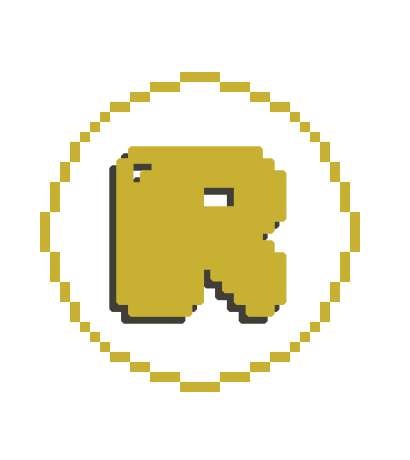
<style>
.page{position:relative;width:410px;height:460px;background:#ffffff}
.page>*{position:absolute;margin:0}
.t1{font:200px "04b30";letter-spacing:0.05em;color:#c8b132;font-weight:bold}
</style>
<div class="page">
<p class="t1" style="left:116px;top:146px;width:171px;height:171px">R</p>
<p class="t1" style="left:109px;top:153px;width:171px;height:171px">R</p>
</div>
